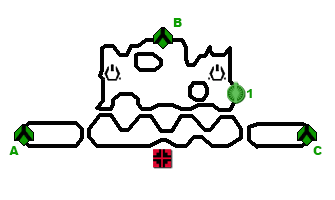
<style>
.page{position:relative;width:335px;height:200px;background:#ffffff}
.page>*{position:absolute;margin:0}
.t1{font:12px "Arial-Black";color:#0d9e01}
</style>
<div class="page">
<p class="t1" style="left:173px;top:18px;width:9px;height:9px">B</p>
<p class="t1" style="left:247px;top:89px;width:5px;height:9px">1</p>
<p class="t1" style="left:9px;top:146px;width:10px;height:9px">A</p>
<p class="t1" style="left:313px;top:146px;width:9px;height:9px">C</p>
</div>
